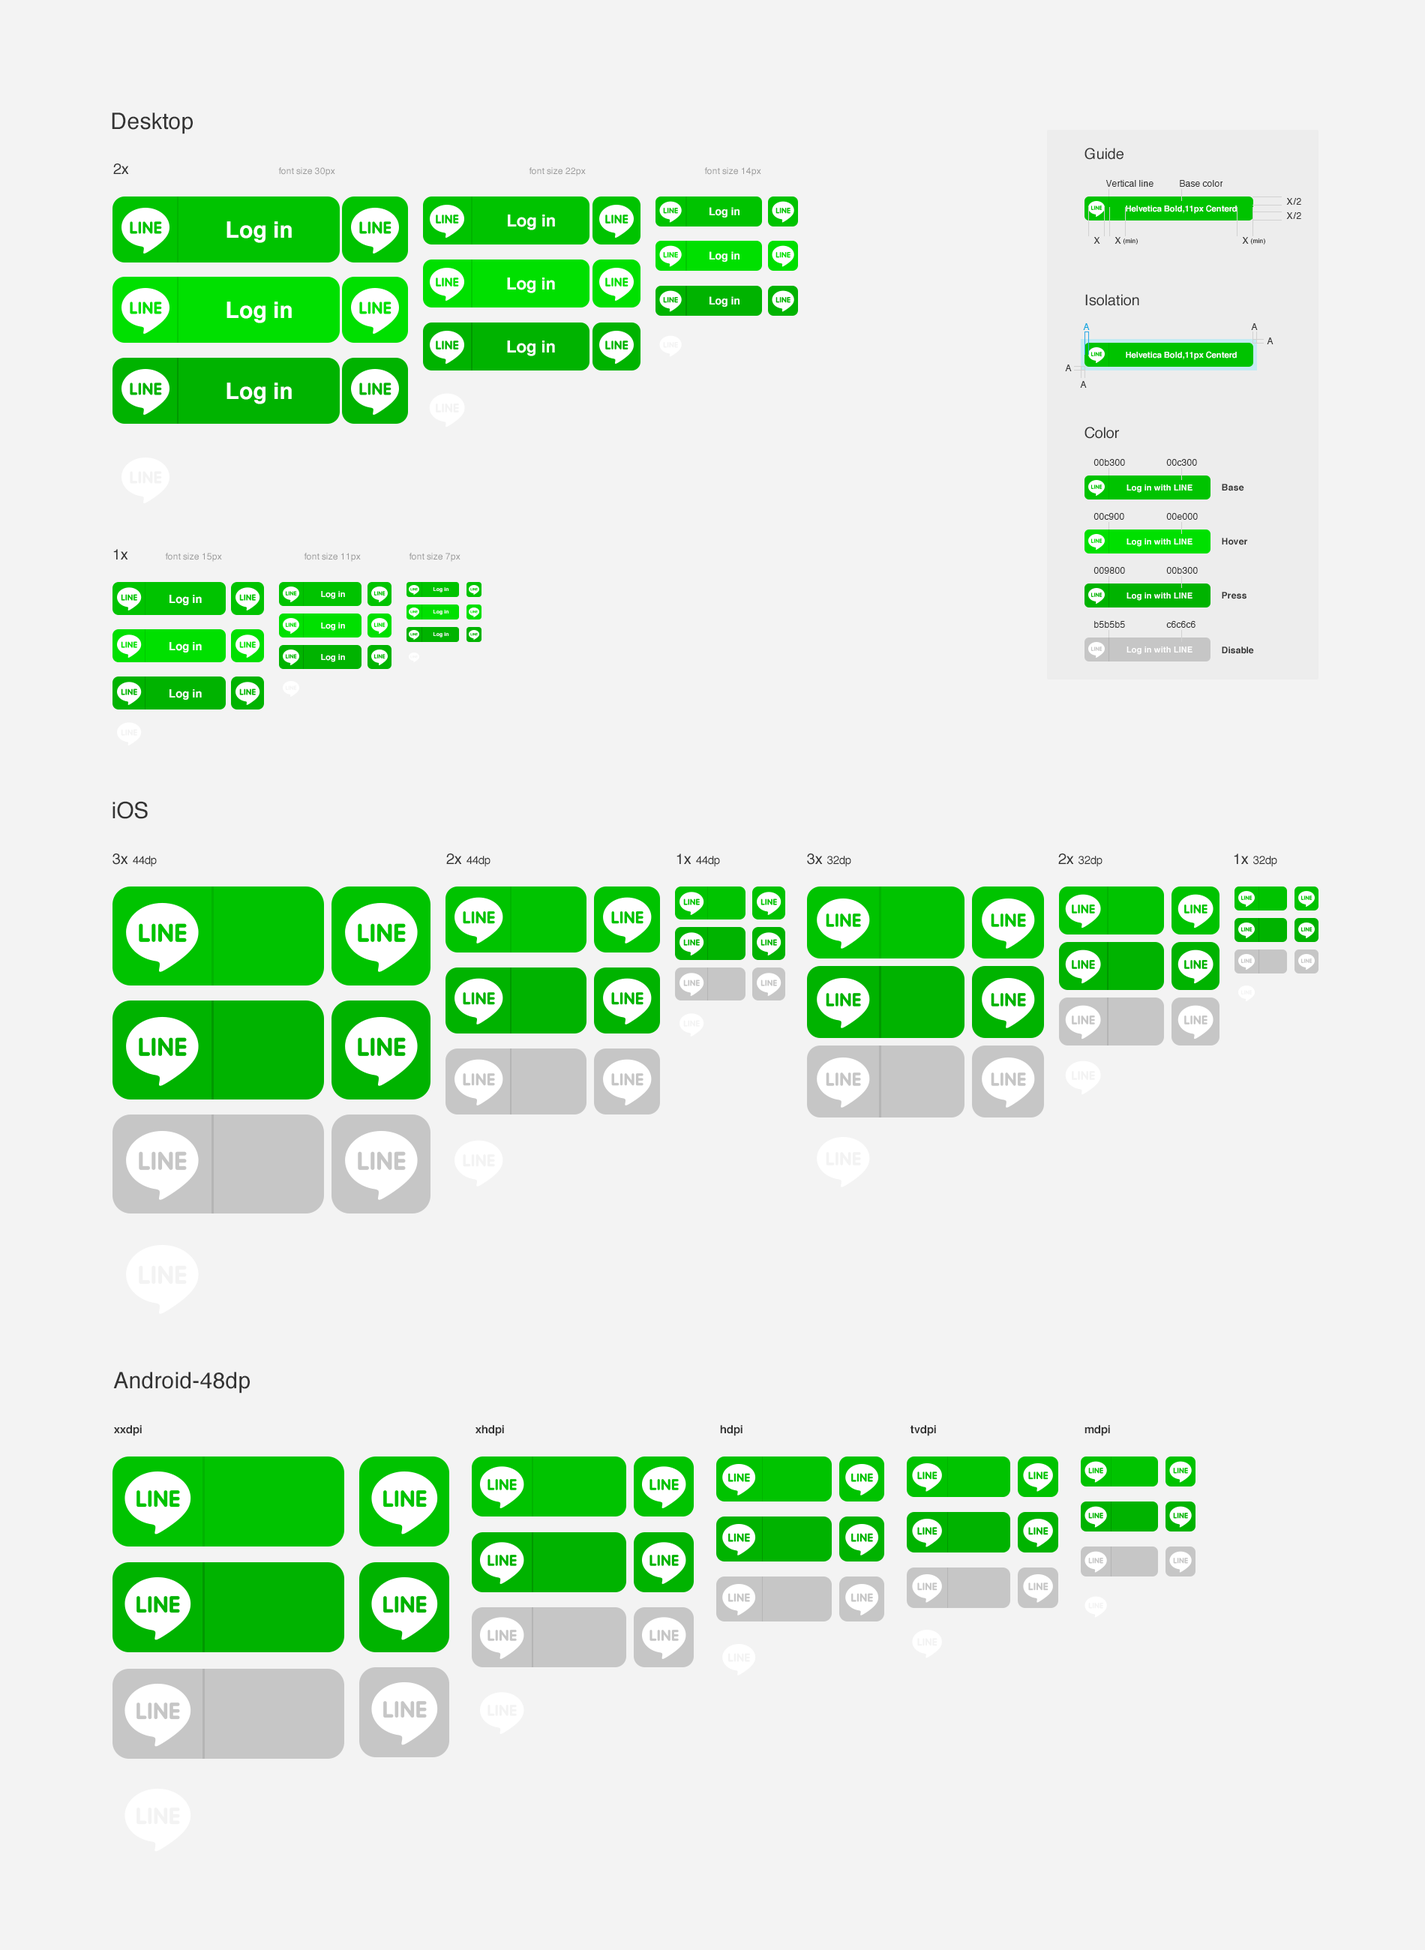
<style>
.page{position:relative;width:1425px;height:1950px;background:#f3f3f3}
.page>*{position:absolute;margin:0}
.t1{font:22.5px "Helvetica";color:#333333}
.t2{font:15px "Helvetica";color:#333333}
.t3{font:9px "Helvetica";color:#999999}
.t4{font:9px "Helvetica";color:#333333}
.t5{font:10.5px "Helvetica-Bold";color:#ffffff}
.t6{font:8.2px "Helvetica-Bold";color:#ffffff}
.t7{font:22.5px "Helvetica-Bold";color:#ffffff}
.t8{font:16.5px "Helvetica-Bold";color:#ffffff}
.t9{font:6.3px "Helvetica";color:#333333}
.t10{font:9px "Helvetica";color:#00a5df}
.t11{font:9px "Helvetica-Bold";color:#333333}
.t12{font:5.2px "Helvetica-Bold";color:#ffffff}
.t13{font:11.2px "Helvetica-Bold";color:#ffffff}
.t14{font:11.2px "Helvetica";color:#333333}
.t15{font:11.2px "Helvetica-Bold";color:#333333}
</style>
<div class="page">
<p class="t1" style="left:112px;top:112px;width:81px;height:22px">Desktop</p>
<p class="t2" style="left:1084px;top:148px;width:40px;height:12px">Guide</p>
<p class="t2" style="left:113px;top:164px;width:16px;height:10px">2x</p>
<p class="t3" style="left:278px;top:167px;width:57px;height:9px">font size 30px</p>
<p class="t3" style="left:529px;top:167px;width:57px;height:9px">font size 22px</p>
<p class="t3" style="left:704px;top:167px;width:57px;height:9px">font size 14px</p>
<p class="t4" style="left:1106px;top:180px;width:48px;height:7px">Vertical line</p>
<p class="t4" style="left:1180px;top:180px;width:43px;height:7px">Base color</p>
<p class="t4" style="left:1286px;top:198px;width:15px;height:7px">X/2</p>
<p class="t5" style="left:710px;top:207px;width:30px;height:11px">Log in</p>
<p class="t6" style="left:1126px;top:205px;width:111px;height:9px">Helvetica Bold,11px Centerd</p>
<p class="t7" style="left:226px;top:221px;width:66px;height:22px">Log in</p>
<p class="t8" style="left:508px;top:214px;width:47px;height:16px">Log in</p>
<p class="t4" style="left:1286px;top:212px;width:15px;height:7px">X/2</p>
<p class="t4" style="left:1094px;top:237px;width:6px;height:7px">X</p>
<p class="t9" style="left:1114px;top:237px;width:24px;height:7px"><span class="t4">X </span>(min)</p>
<p class="t9" style="left:1242px;top:237px;width:23px;height:7px"><span class="t4">X </span>(min)</p>
<p class="t5" style="left:710px;top:251px;width:30px;height:11px">Log in</p>
<p class="t8" style="left:507px;top:278px;width:48px;height:15px">Log in</p>
<p class="t2" style="left:1085px;top:294px;width:54px;height:12px">Isolation</p>
<p class="t7" style="left:226px;top:302px;width:66px;height:21px">Log in</p>
<p class="t5" style="left:710px;top:296px;width:30px;height:11px">Log in</p>
<p class="t10" style="left:1083px;top:323px;width:7px;height:7px">A</p>
<p class="t4" style="left:1251px;top:323px;width:7px;height:7px">A</p>
<p class="t8" style="left:507px;top:340px;width:48px;height:16px">Log in</p>
<p class="t4" style="left:1267px;top:338px;width:7px;height:6px">A</p>
<p class="t6" style="left:1126px;top:351px;width:111px;height:9px">Helvetica Bold,11px Centerd</p>
<p class="t4" style="left:1065px;top:364px;width:7px;height:7px">A</p>
<p class="t7" style="left:226px;top:382px;width:66px;height:22px">Log in</p>
<p class="t4" style="left:1080px;top:381px;width:7px;height:7px">A</p>
<p class="t2" style="left:1084px;top:427px;width:35px;height:12px">Color</p>
<p class="t4" style="left:1094px;top:459px;width:31px;height:7px">00b300</p>
<p class="t4" style="left:1166px;top:459px;width:31px;height:7px">00c300</p>
<p class="t6" style="left:1126px;top:484px;width:66px;height:9px">Log in with LINE</p>
<p class="t11" style="left:1222px;top:484px;width:22px;height:7px">Base</p>
<p class="t4" style="left:1094px;top:513px;width:30px;height:7px">00c900</p>
<p class="t4" style="left:1166px;top:513px;width:32px;height:7px">00e000</p>
<p class="t6" style="left:1126px;top:538px;width:66px;height:9px">Log in with LINE</p>
<p class="t11" style="left:1222px;top:538px;width:25px;height:7px">Hover</p>
<p class="t2" style="left:113px;top:549px;width:15px;height:11px">1x</p>
<p class="t3" style="left:165px;top:553px;width:57px;height:9px">font size 15px</p>
<p class="t3" style="left:304px;top:553px;width:57px;height:9px">font size 11px</p>
<p class="t3" style="left:409px;top:553px;width:51px;height:9px">font size 7px</p>
<p class="t4" style="left:1094px;top:567px;width:31px;height:7px">009800</p>
<p class="t4" style="left:1166px;top:567px;width:32px;height:7px">00b300</p>
<p class="t6" style="left:321px;top:591px;width:24px;height:8px">Log in</p>
<p class="t12" style="left:434px;top:587px;width:14px;height:5px">Log in</p>
<p class="t6" style="left:1126px;top:592px;width:66px;height:9px">Log in with LINE</p>
<p class="t11" style="left:1222px;top:592px;width:24px;height:7px">Press</p>
<p class="t13" style="left:170px;top:595px;width:32px;height:10px">Log in</p>
<p class="t12" style="left:434px;top:610px;width:14px;height:5px">Log in</p>
<p class="t6" style="left:321px;top:622px;width:24px;height:9px">Log in</p>
<p class="t4" style="left:1094px;top:621px;width:31px;height:7px">b5b5b5</p>
<p class="t4" style="left:1166px;top:621px;width:30px;height:7px">c6c6c6</p>
<p class="t12" style="left:434px;top:632px;width:14px;height:6px">Log in</p>
<p class="t13" style="left:170px;top:642px;width:32px;height:10px">Log in</p>
<p class="t6" style="left:321px;top:654px;width:24px;height:8px">Log in</p>
<p class="t6" style="left:1126px;top:646px;width:66px;height:9px">Log in with LINE</p>
<p class="t11" style="left:1222px;top:646px;width:32px;height:8px">Disable</p>
<p class="t13" style="left:170px;top:689px;width:32px;height:11px">Log in</p>
<p class="t1" style="left:112px;top:801px;width:36px;height:18px">iOS</p>
<p class="t14" style="left:112px;top:854px;width:45px;height:13px"><span class="t2">3x </span>44dp</p>
<p class="t14" style="left:446px;top:854px;width:44px;height:13px"><span class="t2">2x </span>44dp</p>
<p class="t14" style="left:676px;top:854px;width:44px;height:13px"><span class="t2">1x </span>44dp</p>
<p class="t14" style="left:807px;top:854px;width:44px;height:13px"><span class="t2">3x </span>32dp</p>
<p class="t14" style="left:1058px;top:854px;width:44px;height:13px"><span class="t2">2x </span>32dp</p>
<p class="t14" style="left:1234px;top:854px;width:43px;height:13px"><span class="t2">1x </span>32dp</p>
<p class="t1" style="left:113px;top:1372px;width:137px;height:22px">Android-48dp</p>
<p class="t15" style="left:114px;top:1425px;width:28px;height:11px">xxdpi</p>
<p class="t15" style="left:476px;top:1425px;width:28px;height:11px">xhdpi</p>
<p class="t15" style="left:720px;top:1425px;width:22px;height:11px">hdpi</p>
<p class="t15" style="left:910px;top:1425px;width:26px;height:11px">tvdpi</p>
<p class="t15" style="left:1084px;top:1425px;width:26px;height:11px">mdpi</p>
</div>
